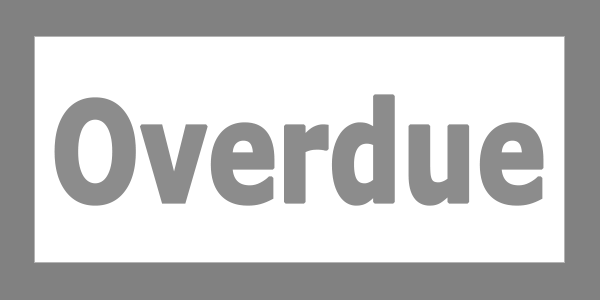
<style>
.page{position:relative;width:600px;height:300px;background:#ffffff}
.page>*{position:absolute;margin:0}
.t1{font:138.9px "Verdana-Bold";letter-spacing:-0.025em;color:#8c8c8c;font-weight:bold;scale:0.75 1}
</style>
<div class="page">
<p class="t1" style="left:54px;top:94px;width:490px;height:112px">Overdue</p>
</div>
